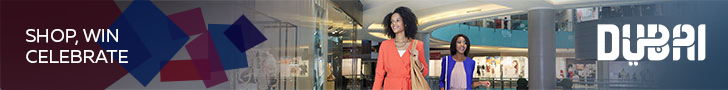
<style>
.page{position:relative;width:728px;height:90px}
.page>*{position:absolute;margin:0}
.t1{font:18px "Muller-Regular";color:#ffffff}
</style>
<div class="page">
<p class="t1" style="left:26px;top:29px;width:102px;height:34px">SHOP, WIN<br>CELEBRATE</p>
</div>
